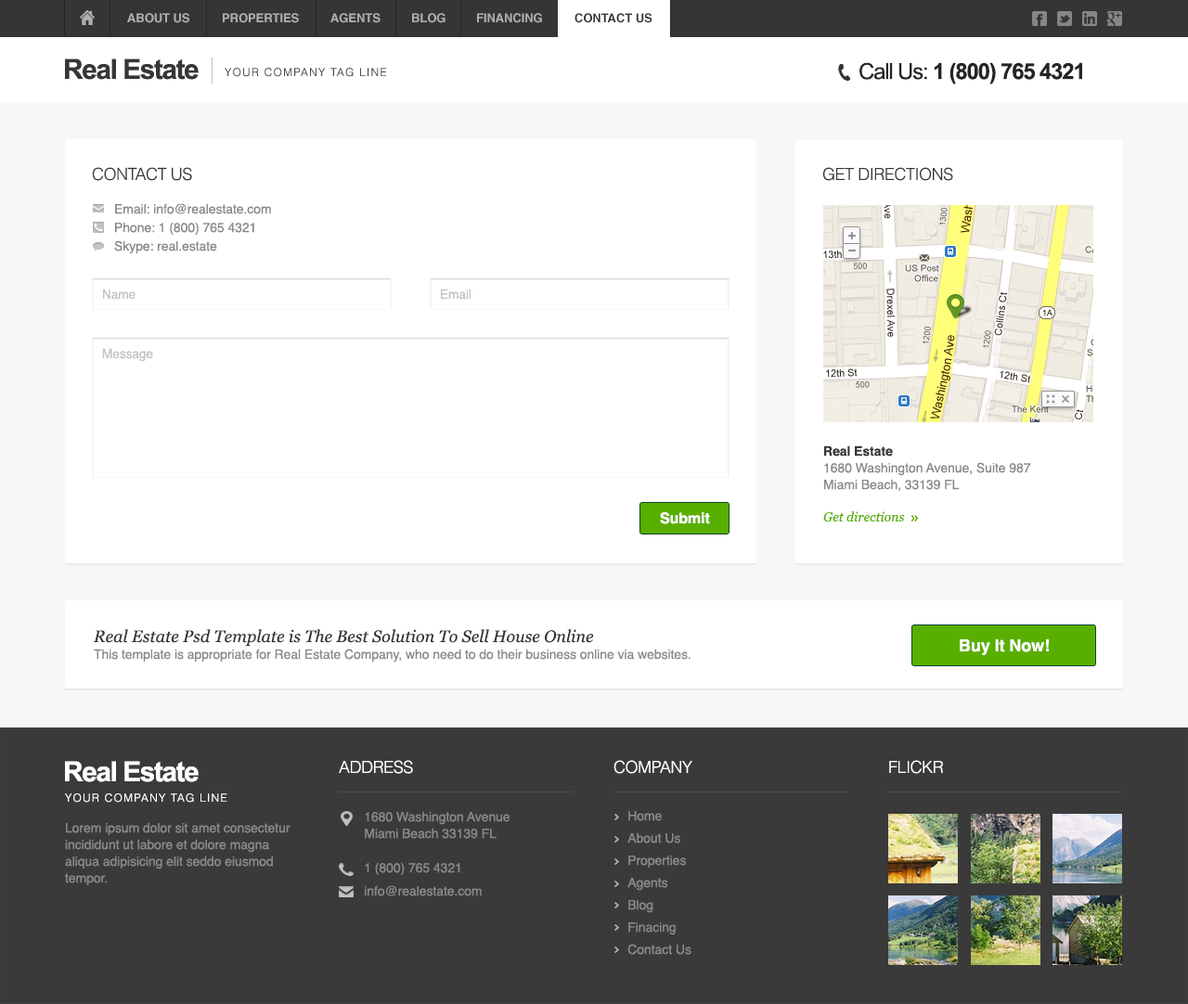
<style>
.page{position:relative;width:1188px;height:1004px;background:#ffffff}
.page>*{position:absolute;margin:0}
.t1{font:12.1px "Helvetica-Bold";letter-spacing:-0.005em;color:#aeaeae;text-transform:uppercase}
.t2{font:12.1px "Helvetica-Bold";letter-spacing:-0.005em;color:#363636;text-transform:uppercase}
.t3{font:27.8px "Arial-BoldMT";letter-spacing:-0.05em;color:#363636}
.t4{font:22.3px "Arial-BoldMT";letter-spacing:-0.05em;color:#252525}
.t5{font:22.3px "ArialMT";letter-spacing:-0.05em;color:#252525}
.t6{font:11.1px "Helvetica-Light";letter-spacing:0.1em;color:#4b4b4b;text-transform:uppercase}
.t7{font:16.7px "Helvetica-Light";letter-spacing:-0.025em;color:#363636;text-transform:uppercase}
.t8{font:13px/18.6px "Helvetica";letter-spacing:-0.005em;color:#898989}
.t9{font:13px/37.1px "Helvetica";letter-spacing:-0.005em;color:#898989}
.t10{font:13px "Helvetica";letter-spacing:-0.005em;color:#c2c2c2}
.t11{font:13px/16.7px "Helvetica";letter-spacing:-0.005em;color:#898989}
.t12{font:13px/24.1px "Helvetica-Bold";letter-spacing:-0.005em;color:#363636}
.t13{font:13px "Georgia-Italic";color:#59af00}
.t14{font:14.8px "Helvetica-Bold";letter-spacing:-0.005em;color:#ffffff}
.t15{font:16.7px/16.7px "Georgia-Italic";color:#363636}
.t16{font:16.7px "Helvetica-Bold";letter-spacing:-0.005em;color:#ffffff}
.t17{font:27.8px "Arial-BoldMT";letter-spacing:-0.05em;color:#ffffff}
.t18{font:16.7px "Helvetica-Light";letter-spacing:-0.025em;color:#ffffff;text-transform:uppercase}
.t19{font:11.1px "Helvetica-Light";letter-spacing:0.1em;color:#ffffff;text-transform:uppercase}
.t20{font:13px/22.3px "Helvetica";letter-spacing:-0.005em;color:#898989}
.t21{font:13px "Helvetica";letter-spacing:-0.005em;color:#898989}
</style>
<div class="page">
<p class="t1" style="left:127px;top:13px;width:62px;height:10px">About Us</p>
<p class="t1" style="left:223px;top:13px;width:76px;height:10px">Properties</p>
<p class="t1" style="left:330px;top:13px;width:50px;height:10px">AgentS</p>
<p class="t1" style="left:412px;top:13px;width:33px;height:10px">Blog</p>
<p class="t1" style="left:477px;top:13px;width:65px;height:10px">Financing</p>
<p class="t2" style="left:574px;top:13px;width:78px;height:10px">Contact US</p>
<p class="t3" style="left:65px;top:58px;width:134px;height:22px">Real Estate</p>
<p class="t4" style="left:859px;top:62px;width:223px;height:22px"><span class="t5">Call Us:</span> 1 (800) 765 4321</p>
<p class="t6" style="left:225px;top:68px;width:162px;height:9px">Your Company Tag Line</p>
<p class="t7" style="left:92px;top:167px;width:100px;height:14px">Contact US</p>
<p class="t7" style="left:822px;top:167px;width:131px;height:14px">Get directions</p>
<p class="t8" style="left:114px;top:203px;width:157px;height:51px"><span class="t9">Email: info@realestate.com<br></span>Phone: 1 (800) 765 4321<br>Skype: real.estate</p>
<p class="t10" style="left:103px;top:289px;width:32px;height:11px">Name</p>
<p class="t10" style="left:441px;top:289px;width:29px;height:11px">Email</p>
<p class="t10" style="left:102px;top:348px;width:51px;height:14px">Message</p>
<p class="t11" style="left:823px;top:445px;width:208px;height:77px"><span class="t12">Real Estate<br></span>1680 Washington Avenue, Suite 987<br>Miami Beach, 33139 FL<br><br><span class="t13">Get directions</span></p>
<p class="t14" style="left:660px;top:512px;width:50px;height:12px">Submit</p>
<p class="t11" style="left:93px;top:629px;width:597px;height:34px"><span class="t15">Real Estate Psd Template is The Best Solution To Sell House Online<br></span>This template is appropriate for Real Estate Company, who need to do their business online via websites.</p>
<p class="t16" style="left:959px;top:639px;width:90px;height:16px">Buy It Now!</p>
<p class="t17" style="left:65px;top:761px;width:134px;height:21px">Real Estate</p>
<p class="t18" style="left:339px;top:760px;width:74px;height:14px">Address</p>
<p class="t18" style="left:613px;top:760px;width:79px;height:14px">Company</p>
<p class="t18" style="left:889px;top:760px;width:54px;height:14px">Flickr</p>
<p class="t19" style="left:65px;top:793px;width:162px;height:10px">Your Company Tag Line</p>
<p class="t11" style="left:365px;top:811px;width:144px;height:28px">1680 Washington Avenue<br>Miami Beach 33139 FL</p>
<p class="t20" style="left:627px;top:811px;width:64px;height:144px">Home<br>About Us<br>Properties<br>Agents<br>Blog<br>Finacing<br>Contact Us</p>
<p class="t11" style="left:65px;top:822px;width:225px;height:63px">Lorem ipsum dolor sit amet consectetur incididunt ut labore et dolore magna aliqua adipisicing elit seddo eiusmod tempor.</p>
<p class="t21" style="left:365px;top:862px;width:95px;height:13px">1 (800) 765 4321</p>
<p class="t21" style="left:365px;top:885px;width:117px;height:11px">info@realestate.com</p>
</div>
